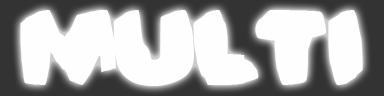
<style>
.page{position:relative;width:384px;height:96px;background:#fefefe}
.page>*{position:absolute;margin:0}
.t1{font:100px "Bomberman";color:#fefefe}
</style>
<div class="page">
<p class="t1" style="left:20px;top:10px;width:343px;height:76px">Multi</p>
</div>
